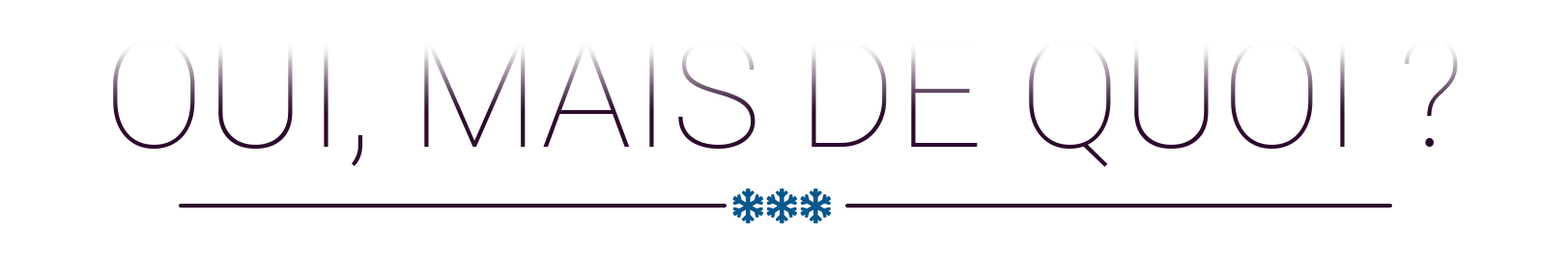
<style>
.page{position:relative;width:1568px;height:279px;background:#ffffff}
.page>*{position:absolute;margin:0}
.t1{font:151.6px "Roboto-Thin";color:#2c0a2d}
</style>
<div class="page">
<p class="t1" style="left:113px;top:38px;width:1345px;height:129px">OUI, MAIS DE QUOI ?</p>
</div>
